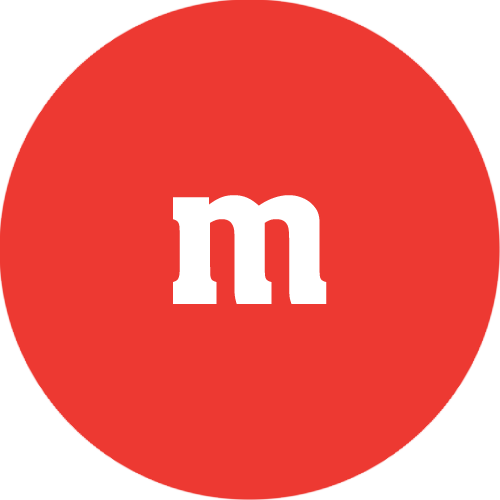
<style>
.page{position:relative;width:500px;height:500px;background:#ed3932}
.page>*{position:absolute;margin:0}
.t1{font:216px "AachenMediumPlain";color:#ffffff}
</style>
<div class="page">
<p class="t1" style="left:173px;top:195px;width:154px;height:109px">m</p>
</div>
